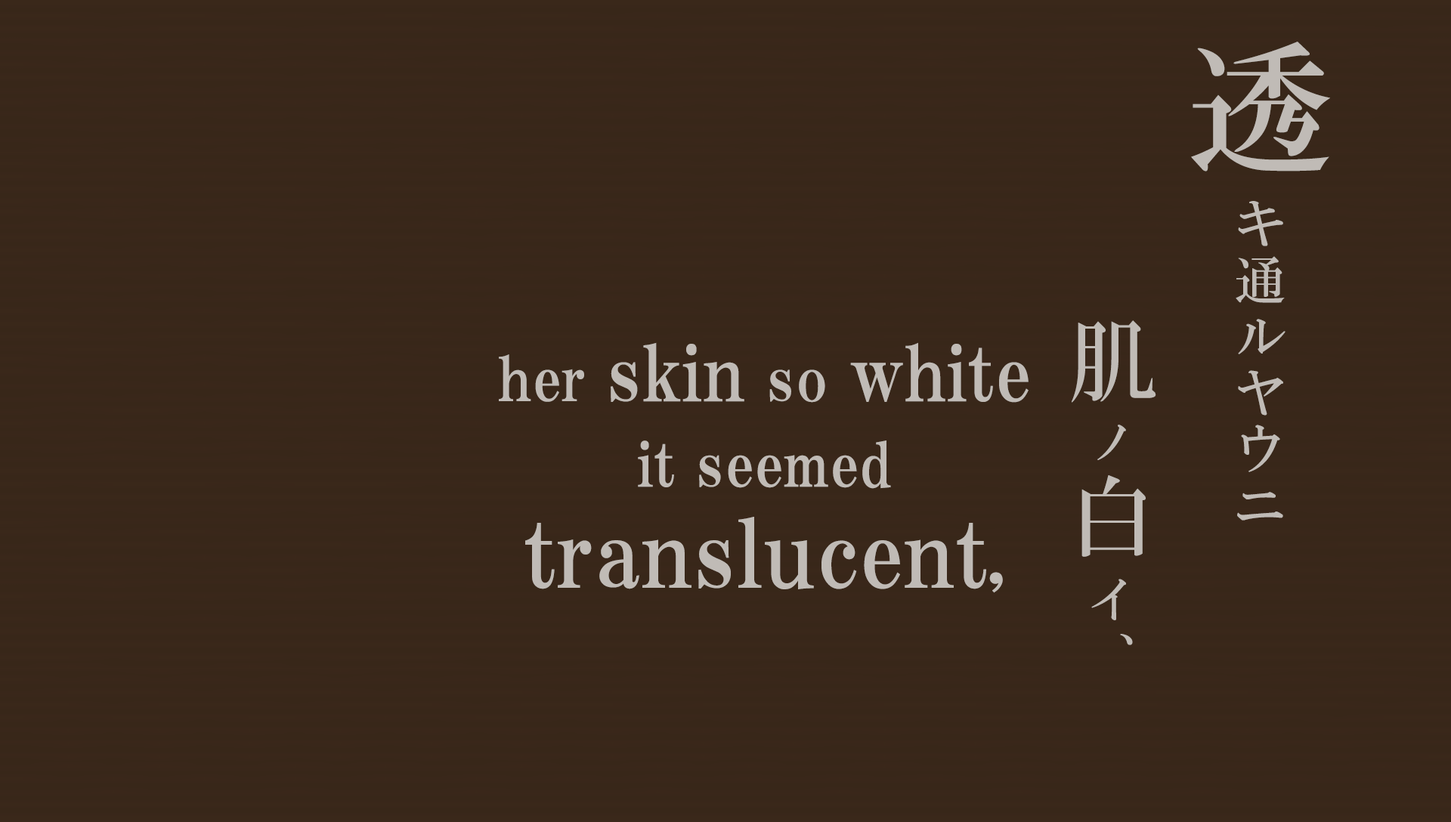
<style>
.page{position:relative;width:1451px;height:822px;background:#382719}
.page>*{position:absolute;margin:0}
.t1{font:51.7px/147.6px "HGMinchoB";letter-spacing:0.09em;color:#c0bbb6}
.t2{font:143.8px/147.6px "HGMinchoB";letter-spacing:0.13em;color:#c0bbb6}
.t3{font:88.7px/147.6px "HGMinchoB";letter-spacing:0.17em;color:#c0bbb6}
.t4{font:45.6px/147.6px "HGMinchoB";letter-spacing:0.17em;color:#c0bbb6}
.t5{font:47.1px/147.6px "HGMinchoB";letter-spacing:0.17em;color:#c0bbb6}
.t6{font:92.7px/100.7px "HGPMinchoE";letter-spacing:0.01em;color:#c0bbb6}
.t7{font:60.8px/90.7px "HGPMinchoE";letter-spacing:0.01em;color:#c0bbb6}
.t8{font:76px/90.7px "HGPMinchoE";letter-spacing:0.01em;color:#c0bbb6}
.t9{font:60.8px/85.6px "HGPMinchoE";letter-spacing:0.01em;color:#c0bbb6}
.t10{font:60.8px/100.7px "HGPMinchoE";letter-spacing:0.01em;color:#c0bbb6}
</style>
<div class="page">
<p class="t1" style="left:1071px;top:42px;width:259px;height:603px"><span class="t2">透</span>キ通ルヤウニ<br>   <span class="t3">肌</span><span class="t4">ノ</span><span class="t3">白</span><span class="t5">イ、</span></p>
<p class="t6" style="left:499px;top:342px;width:529px;height:251px;text-align:center"><span class="t7">her </span><span class="t8">skin</span><span class="t7"> so </span><span class="t8">white<br></span><span class="t9">it seemed<br></span>translucent<span class="t10">,</span></p>
</div>
